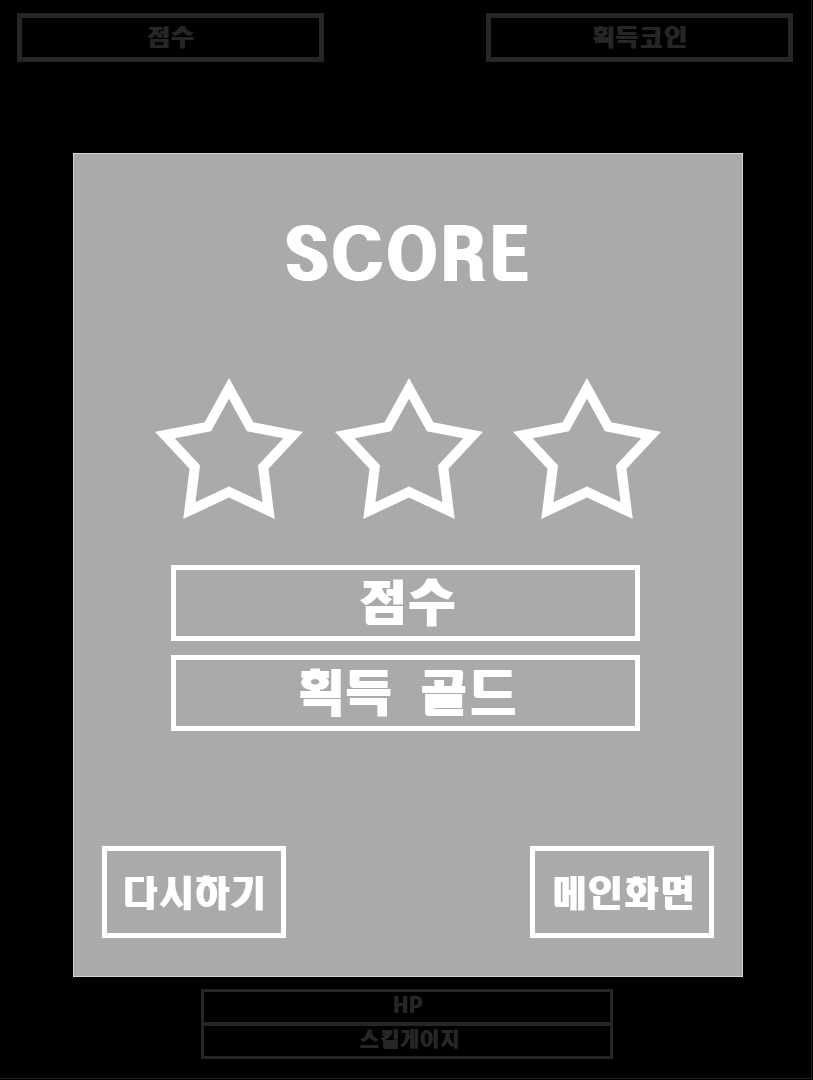
<style>
.page{position:relative;width:813px;height:1080px;background:#aaaaaa}
.page>*{position:absolute;margin:0}
.t1{font:24px "HeadlineR-HM";color:#262626}
.t2{font:64px "HeadlineR-HM";color:#ffffff}
.t3{font:49.3px "HeadlineR-HM";color:#ffffff}
.t4{font:36px "HeadlineR-HM";color:#ffffff}
.t5{font:20px "HeadlineR-HM";color:#262626}
</style>
<div class="page">
<p class="t1" style="left:147px;top:26px;width:47px;height:23px">점수</p>
<p class="t1" style="left:593px;top:26px;width:93px;height:23px">획득코인</p>
<p class="t2" style="left:286px;top:225px;width:242px;height:56px">SCORE</p>
<p class="t3" style="left:360px;top:578px;width:95px;height:49px">점수</p>
<p class="t3" style="left:300px;top:668px;width:215px;height:49px">획득 골드</p>
<p class="t4" style="left:125px;top:875px;width:138px;height:36px">다시하기</p>
<p class="t4" style="left:554px;top:875px;width:139px;height:36px">메인화면</p>
<p class="t5" style="left:394px;top:996px;width:29px;height:17px">HP</p>
<p class="t5" style="left:360px;top:1029px;width:98px;height:20px">스킬게이지</p>
</div>
